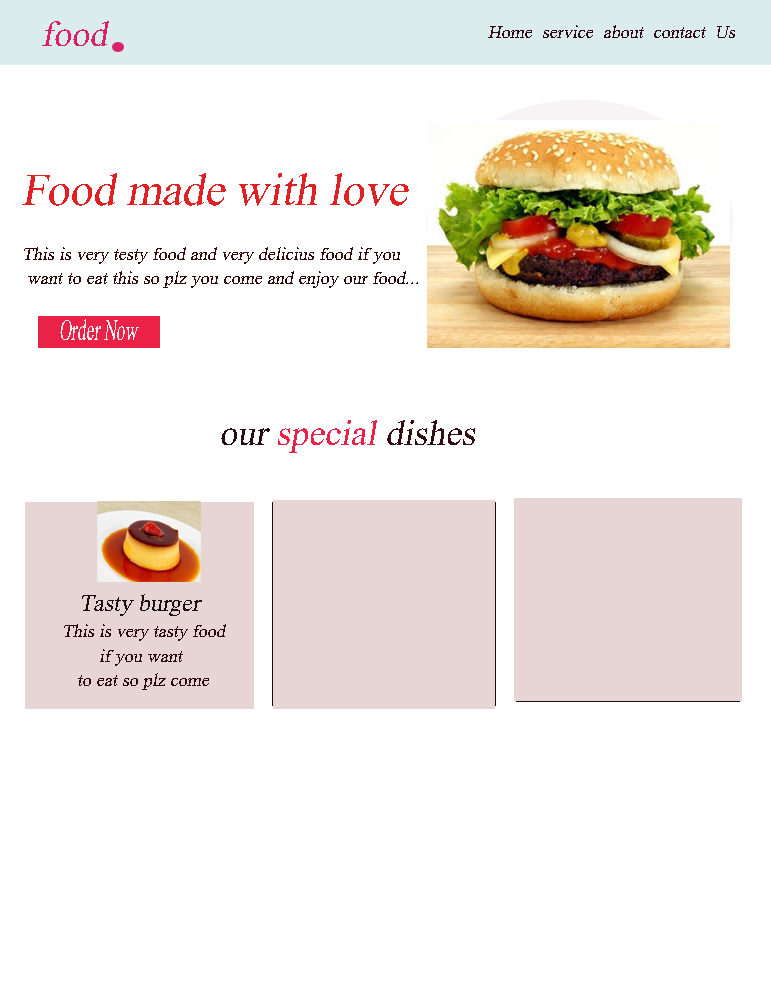
<style>
.page{position:relative;width:771px;height:1000px;background:#ffffff}
.page>*{position:absolute;margin:0}
.t1{font:36px "TimesNewRomanPSMT";color:#d9216b;font-style:italic}
.t2{font:18px "TimesNewRomanPSMT";color:#310b1a;font-style:italic}
.t3{font:45.5px "TimesNewRomanPSMT";color:#e12024;font-style:italic}
.t4{font:18px/24.4px "TimesNewRomanPSMT";color:#330b0c;font-style:italic}
.t5{font:18px/24.4px "TimesNewRomanPSMT";color:#2b090a;font-style:italic}
.t6{font:30px "TimesNewRomanPSMT";color:#f1eaec;font-style:italic;scale:0.58 1}
.t7{font:36px "TimesNewRomanPSMT";color:#ea2248;font-style:italic}
.t8{font:36px "TimesNewRomanPSMT";color:#270c11;font-style:italic}
.t9{font:36px "TimesNewRomanPSMT";color:#340d14;font-style:italic}
.t10{font:24px "TimesNewRomanPSMT";color:#191111;font-style:italic}
.t11{font:36px "TimesNewRomanPSMT";color:#e7d4d4;font-style:italic}
.t12{font:18px/24.4px "TimesNewRomanPSMT";color:#2b0b0b;font-style:italic}
.t13{font:18px/24.4px "TimesNewRomanPSMT";color:#e7d4d4;font-style:italic}
</style>
<div class="page">
<p class="t1" style="left:42px;top:21px;width:67px;height:25px">food</p>
<p class="t2" style="left:488px;top:25px;width:247px;height:13px">Home  service  about  contact  Us</p>
<p class="t3" style="left:22px;top:173px;width:387px;height:33px">Food made with love</p>
<p class="t4" style="left:24px;top:247px;width:394px;height:41px">This is very testy food and very delicius food if you<br> want to eat this so plz you come <span class="t5">and enjoy our food...</span></p>
<p class="t6" style="left:60px;top:319px;width:79px;height:21px">Order Now</p>
<p class="t7" style="left:221px;top:420px;width:254px;height:33px"><span class="t8">our</span> special <span class="t9">dishes</span></p>
<p class="t10" style="left:51px;top:586px;width:151px;height:30px"><span class="t11">df</span>Tasty burger</p>
<p class="t12" style="left:58px;top:624px;width:168px;height:66px;text-align:center"><span class="t13">t</span>This is very tasty food <br>if you want<br> to eat so plz come</p>
</div>
